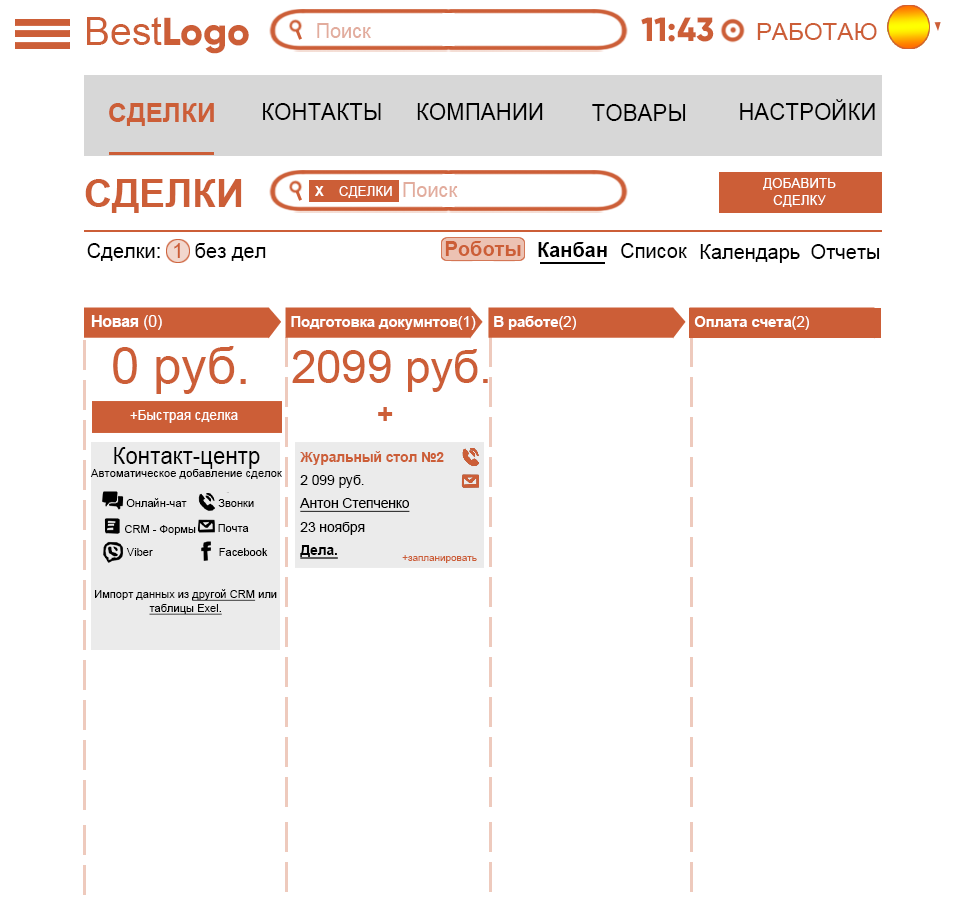
<style>
.page{position:relative;width:960px;height:900px;background:#ffffff}
.page>*{position:absolute;margin:0}
.t1{font:39px "ArialMT";color:#cc5e37}
.t2{font:39px "Gilroy-ExtraBold";color:#cc5e37}
.t3{font:33.4px "Gilroy-ExtraBold";color:#cc5e37}
.t4{font:20.1px "ArialMT";color:#e2ac9d}
.t5{font:24.3px "ArialMT";color:#cc5e37}
.t6{font:22.6px "ArialMT";color:#000000}
.t7{font:26.2px "Arial-BoldMT";color:#cc5e37}
.t8{font:38.9px "Arial-BoldMT";color:#cc5e37}
.t9{font:13.5px/16.8px "ArialMT";color:#ffffff}
.t10{font:13.5px "ArialMT";color:#ffffff}
.t11{font:13.5px "Arial-BoldMT";color:#ffffff}
.t12{font:20.2px "ArialMT";color:#000000}
.t13{font:20.2px "ArialMT";color:#cc5e37}
.t14{font:20.2px "Arial-BoldMT";color:#cc5e37}
.t15{font:20.2px "Arial-BoldMT";color:#000000}
.t16{font:15.7px "Arial-BoldMT";color:#ffffff}
.t17{font:15.7px "ArialMT";color:#ffffff}
.t18{font:14.8px "Arial-BoldMT";color:#ffffff}
.t19{font:14.8px "ArialMT";color:#ffffff}
.t20{font:51.5px "ArialMT";color:#cc5e37}
.t21{font:46.1px "ArialMT";color:#cc5e37}
.t22{font:28.2px "Arial-BoldMT";color:#cc5e37}
.t23{font:13.8px/23.1px "Arial-BoldMT";color:#cc5e37}
.t24{font:13.8px/23.1px "ArialMT";color:#000000}
.t25{font:13.8px/23.1px "ArialMT";color:#000000;text-decoration:underline}
.t26{font:13.8px/23.1px "Arial-BoldMT";color:#000000;text-decoration:underline}
.t27{font:11.4px "ArialMT";color:#000000}
.t28{font:11.2px "ArialMT";color:#000000}
.t29{font:10px "ArialMT";color:#cc5e37}
.t30{font:11.2px/13.9px "ArialMT";color:#000000}
.t31{font:11.2px/13.9px "ArialMT";color:#000000;text-decoration:underline}
</style>
<div class="page">
<p class="t1" style="left:87px;top:17px;width:162px;height:37px">Best<span class="t2">Logo</span></p>
<p class="t3" style="left:641px;top:17px;width:73px;height:25px">11:43</p>
<p class="t4" style="left:317px;top:23px;width:54px;height:15px">Поиск</p>
<p class="t5" style="left:757px;top:23px;width:120px;height:17px">РАБОТАЮ</p>
<p class="t6" style="left:740px;top:99px;width:135px;height:21px">НАСТРОЙКИ</p>
<p class="t7" style="left:109px;top:103px;width:105px;height:23px">СДЕЛКИ</p>
<p class="t6" style="left:263px;top:103px;width:118px;height:17px">КОНТАКТЫ</p>
<p class="t6" style="left:417px;top:103px;width:126px;height:17px">КОМПАНИИ</p>
<p class="t6" style="left:592px;top:104px;width:94px;height:17px">ТОВАРЫ</p>
<p class="t8" style="left:85px;top:179px;width:157px;height:34px">СДЕЛКИ</p>
<p class="t4" style="left:403px;top:182px;width:55px;height:15px">Поиск</p>
<p class="t9" style="left:763px;top:178px;width:73px;height:29px;text-align:center">ДОБАВИТЬ<br>СДЕЛКУ</p>
<p class="t10" style="left:315px;top:186px;width:77px;height:12px"><span class="t11">X   </span> СДЕЛКИ</p>
<p class="t12" style="left:87px;top:243px;width:179px;height:18px">Сделки:  <span class="t13">1</span>  без дел</p>
<p class="t14" style="left:445px;top:241px;width:76px;height:15px">Роботы</p>
<p class="t15" style="left:538px;top:242px;width:69px;height:15px">Канбан</p>
<p class="t12" style="left:621px;top:243px;width:66px;height:15px">Список</p>
<p class="t12" style="left:700px;top:244px;width:100px;height:19px">Календарь</p>
<p class="t12" style="left:811px;top:244px;width:69px;height:15px">Отчеты</p>
<p class="t16" style="left:91px;top:315px;width:71px;height:15px">Новая <span class="t17">(0)</span></p>
<p class="t18" style="left:291px;top:316px;width:185px;height:14px">Подготовка докумнтов<span class="t19">(1)</span></p>
<p class="t18" style="left:494px;top:316px;width:82px;height:14px">В работе<span class="t19">(2)</span></p>
<p class="t18" style="left:694px;top:316px;width:115px;height:14px">Оплата счета<span class="t19">(2)</span></p>
<p class="t20" style="left:113px;top:346px;width:133px;height:48px">0 руб.</p>
<p class="t21" style="left:292px;top:349px;width:196px;height:43px">2099 руб.</p>
<p class="t10" style="left:130px;top:410px;width:108px;height:13px">+Быстрая сделка</p>
<p class="t22" style="left:378px;top:407px;width:15px;height:14px">+</p>
<p class="t6" style="left:114px;top:447px;width:146px;height:22px">Контакт-центр</p>
<p class="t23" style="left:299px;top:451px;width:145px;height:108px">Журальный стол №2<br><span class="t24">2 099 руб.<br></span><span class="t25">Антон Степченко<br></span><span class="t24">23 ноября<br></span><span class="t26">Дела.</span></p>
<p class="t27" style="left:90px;top:469px;width:192px;height:10px">Автоматическое добавление сделок</p>
<p class="t28" style="left:126px;top:498px;width:61px;height:9px">Онлайн-чат</p>
<p class="t28" style="left:218px;top:499px;width:36px;height:8px">Звонки</p>
<p class="t28" style="left:125px;top:525px;width:71px;height:10px">CRM - Формы</p>
<p class="t28" style="left:218px;top:524px;width:31px;height:8px">Почта</p>
<p class="t28" style="left:126px;top:548px;width:27px;height:8px">Viber</p>
<p class="t28" style="left:219px;top:548px;width:49px;height:8px">Facebook</p>
<p class="t29" style="left:402px;top:555px;width:75px;height:8px">+запланировать</p>
<p class="t30" style="left:95px;top:589px;width:182px;height:26px;text-align:center">Импорт данных из <span class="t31">другой CRM</span> или<br><span class="t31">таблицы Exel.</span></p>
</div>
